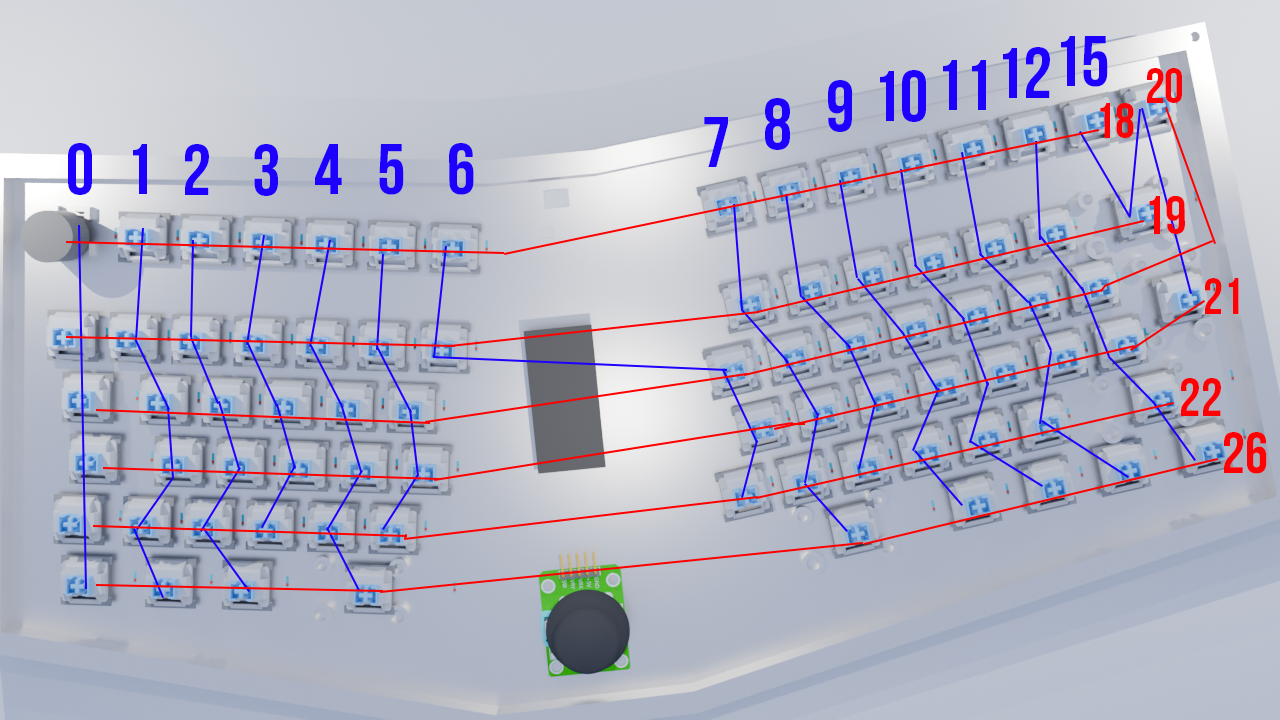
<style>
.page{position:relative;width:1280px;height:720px}
.page>*{position:absolute;margin:0}
.t1{font:72px "BebasNeueBold";color:#1e00ff}
.t2{font:49.8px "BebasNeueBold";color:#ff0004}
.t3{font:49.4px "BebasNeueBold";color:#ff0004}
.t4{font:53.9px "BebasNeueBold";color:#ff0004}
.t5{font:51.1px "BebasNeueBold";color:#ff0004}
.t6{font:54px "BebasNeueBold";color:#ff0004}
.t7{font:57.9px "BebasNeueBold";color:#ff0004}
</style>
<div class="page">
<p class="t1" style="left:1061px;top:36px;width:47px;height:51px">15</p>
<p class="t1" style="left:1003px;top:47px;width:47px;height:51px">12</p>
<p class="t1" style="left:943px;top:60px;width:43px;height:50px">11</p>
<p class="t1" style="left:880px;top:70px;width:46px;height:52px">10</p>
<p class="t2" style="left:1147px;top:68px;width:35px;height:35px">20</p>
<p class="t1" style="left:828px;top:80px;width:25px;height:52px">9</p>
<p class="t1" style="left:765px;top:98px;width:25px;height:52px">8</p>
<p class="t3" style="left:1100px;top:103px;width:34px;height:35px">18</p>
<p class="t1" style="left:704px;top:117px;width:24px;height:50px">7</p>
<p class="t1" style="left:68px;top:143px;width:24px;height:52px">0</p>
<p class="t1" style="left:133px;top:144px;width:14px;height:50px">1</p>
<p class="t1" style="left:185px;top:144px;width:24px;height:51px">2</p>
<p class="t1" style="left:254px;top:144px;width:24px;height:52px">3</p>
<p class="t1" style="left:315px;top:144px;width:27px;height:50px">4</p>
<p class="t1" style="left:379px;top:144px;width:25px;height:51px">5</p>
<p class="t1" style="left:449px;top:143px;width:25px;height:52px">6</p>
<p class="t4" style="left:1149px;top:195px;width:36px;height:39px">19</p>
<p class="t5" style="left:1205px;top:278px;width:34px;height:36px">21</p>
<p class="t6" style="left:1181px;top:378px;width:40px;height:38px">22</p>
<p class="t7" style="left:1224px;top:432px;width:43px;height:42px">26</p>
</div>
